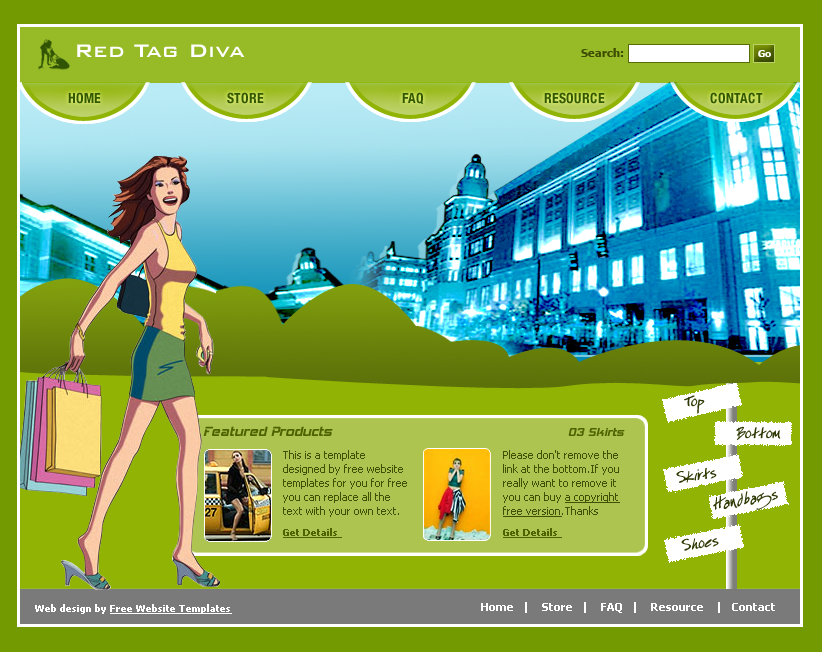
<style>
.page{position:relative;width:822px;height:652px}
.page>*{position:absolute;margin:0}
.t1{font:24px "BankGothicBT-Medium";color:#ffffff}
.t2{font:11px "Tahoma-Bold";color:#3e4d02}
.t3{font:10px "Tahoma-Bold";color:#ffffff}
.t4{font:14px "HelveticaNeue-BoldCond";color:#325900;text-transform:uppercase}
.t5{font:21px "EspecialKay";color:#2d3803}
.t6{font:16px "HemiHead426";color:#4e6200}
.t7{font:14px "HemiHead426";color:#4e6200}
.t8{font:11px/14px "Tahoma";color:#415005}
.t9{font:11px/14px "Tahoma";color:#415005;text-decoration:underline}
.t10{font:10px "Tahoma-Bold";color:#4e6200;text-decoration:underline}
.t11{font:10px "Tahoma-Bold";color:#ffffff;text-decoration:underline}
.t12{font:11px "Tahoma-Bold";color:#ffffff}
</style>
<div class="page">
<p class="t1" style="left:77px;top:44px;width:168px;height:13px">Red Tag Diva</p>
<p class="t2" style="left:581px;top:48px;width:43px;height:9px">Search:</p>
<p class="t3" style="left:758px;top:50px;width:13px;height:7px">Go</p>
<p class="t4" style="left:68px;top:92px;width:695px;height:13px">Home                                          Store                                              FAQ                                        Resource                                   Contact</p>
<p class="t5" style="left:684px;top:395px;width:21px;height:19px">Top</p>
<p class="t6" style="left:203px;top:426px;width:130px;height:10px">Featured Products</p>
<p class="t7" style="left:568px;top:428px;width:57px;height:8px">03 Skirts</p>
<p class="t5" style="left:736px;top:426px;width:45px;height:15px">Bottom</p>
<p class="t8" style="left:283px;top:450px;width:124px;height:67px">This is a template designed by free website templates for you for free you can replace all the text with your own text.</p>
<p class="t8" style="left:503px;top:450px;width:117px;height:67px">Please don't remove the link at the bottom.If you really want to remove it you can buy <span class="t9">a copyright free version</span>.Thanks</p>
<p class="t5" style="left:676px;top:467px;width:41px;height:16px;rotate:-8deg">Skirts</p>
<p class="t5" style="left:713px;top:491px;width:65px;height:19px;rotate:-9deg">Handbags</p>
<p class="t10" style="left:283px;top:528px;width:59px;height:10px">Get Details</p>
<p class="t10" style="left:503px;top:528px;width:59px;height:10px">Get Details</p>
<p class="t5" style="left:681px;top:538px;width:38px;height:13px;rotate:-9deg">Shoes</p>
<p class="t11" style="left:35px;top:604px;width:197px;height:10px"><span class="t3">Web design by </span>Free Website Templates</p>
<p class="t12" style="left:481px;top:602px;width:294px;height:11px">Home   |    Store   |    FAQ   |    Resource    |   Contact</p>
</div>
